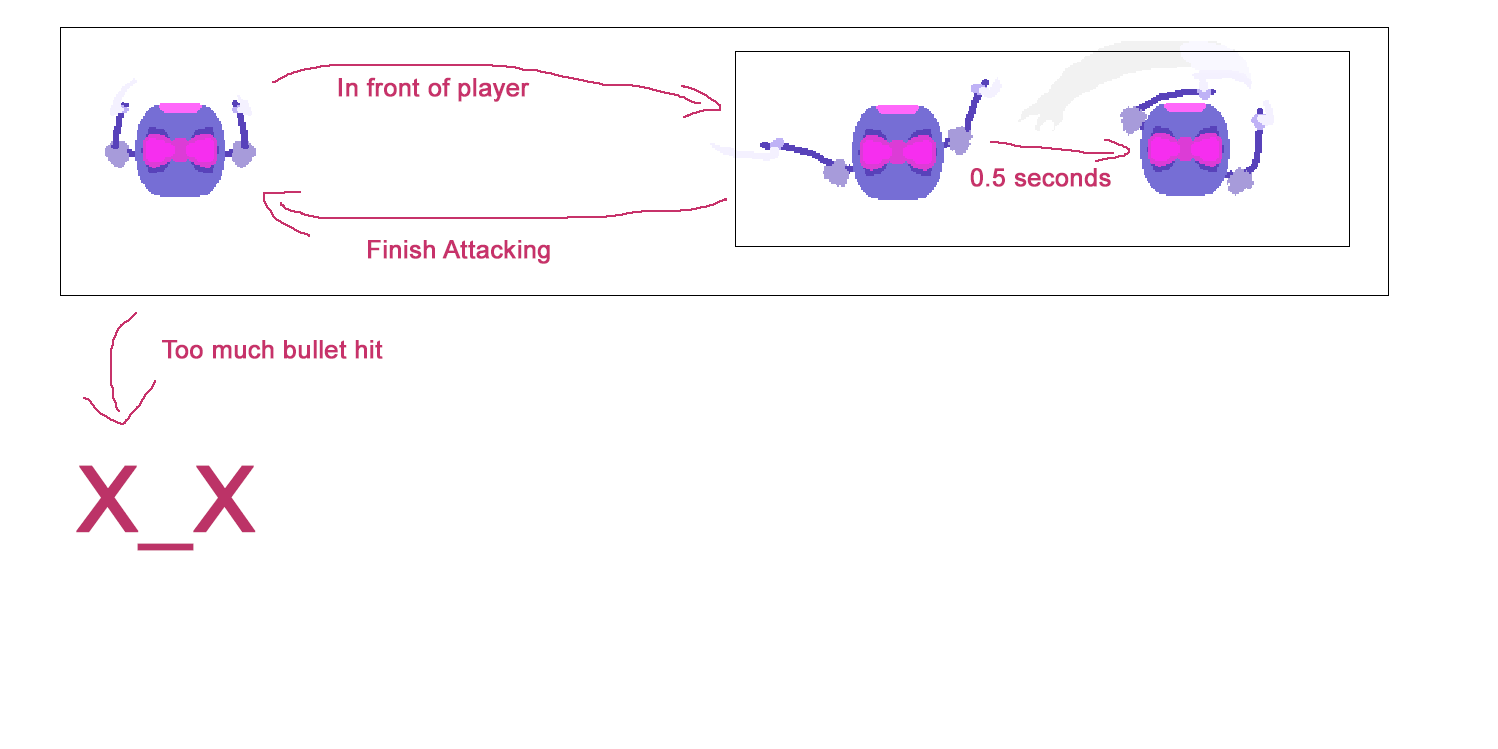
<style>
.page{position:relative;width:1498px;height:749px;background:#ffffff}
.page>*{position:absolute;margin:0}
.t1{font:25px "ArialMT";color:#c7326a;font-weight:bold}
.t2{font:91.5px "ArialMT";color:#bc3367;font-weight:bold}
</style>
<div class="page">
<p class="t1" style="left:338px;top:77px;width:192px;height:25px">In front of player</p>
<p class="t1" style="left:970px;top:168px;width:141px;height:19px">0.5 seconds</p>
<p class="t1" style="left:368px;top:240px;width:182px;height:24px">Finish Attacking</p>
<p class="t1" style="left:162px;top:340px;width:221px;height:19px">Too much bullet hit</p>
<p class="t2" style="left:76px;top:465px;width:180px;height:86px">X_X</p>
</div>
